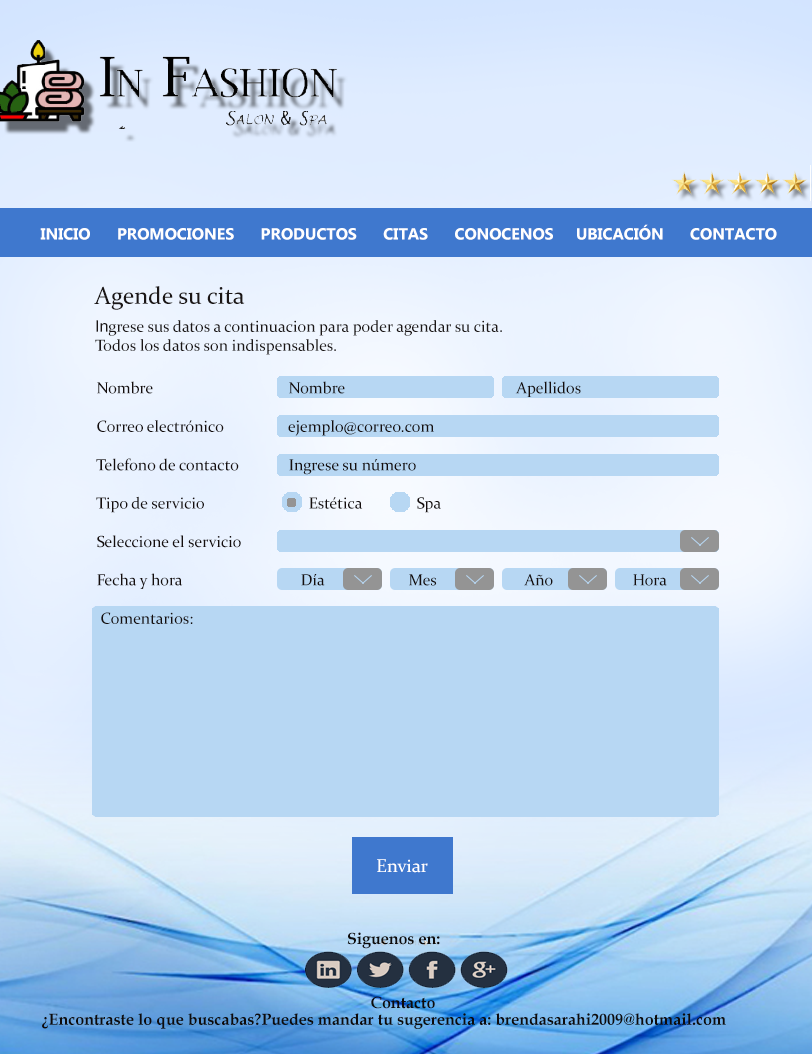
<style>
.page{position:relative;width:812px;height:1054px;background:#b7d7f3}
.page>*{position:absolute;margin:0}
.t1{font:16px "MicrosoftTaiLe-Bold";color:#ffffff}
.t2{font:12px "MicrosoftTaiLe-Bold";color:#ffffff}
.t3{font:24px "Constantia";color:#1b1616}
.t4{font:12px "Constantia";color:#1b1616}
.t5{font:12px "ArialMT";color:#1b1616}
.t6{font:12px "Constantia";color:#150e0e}
.t7{font:18.7px "Constantia";color:#ffffff}
.t8{font:12px "BookAntiqua-Bold";color:#0e0b0b}
</style>
<div class="page">
<p class="t1" style="left:40px;top:224px;width:737px;height:16px"><span class="t2">    I</span>NICIO      PROMOCIONES      PRODUCTOS      CITAS      CONOCENOS     UBICACIÓN      CONTACTO</p>
<p class="t3" style="left:94px;top:286px;width:151px;height:24px">Agende su cita</p>
<p class="t4" style="left:95px;top:320px;width:407px;height:35px"><span class="t5">In</span>grese sus datos a continuacion para poder agendar su cita.<br>Todos los datos son indispensables.</p>
<p class="t6" style="left:96px;top:381px;width:571px;height:243px">Nombre        Nombre           Apellidos<br><br> Correo electrónico      ejemplo@correo.com<br><br> Telefono de contacto     Ingrese su número<br><br> Tipo de servicio   Estética  Spa<br><br> Seleccione el servicio<br><br> Fecha y hora          Día         Mes   Año   Hora<br><br>  Comentarios:</p>
<p class="t7" style="left:377px;top:859px;width:51px;height:14px">Enviar</p>
<p class="t8" style="left:347px;top:932px;width:93px;height:17px">Siguenos en:</p>
<p class="t8" style="left:371px;top:996px;width:64px;height:13px">Contacto</p>
<p class="t8" style="left:42px;top:1013px;width:684px;height:16px">¿Encontraste lo que buscabas?Puedes mandar tu sugerencia a: brendasarahi2009@hotmail.com</p>
</div>
